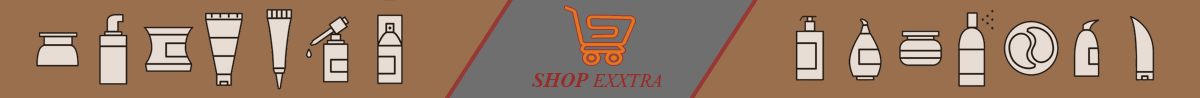
<style>
.page{position:relative;width:1200px;height:98px;background:#996f4e}
.page>*{position:absolute;margin:0}
.t1{font:19.5px "TimesNewRomanPS-Italic";color:#972b28;text-transform:uppercase}
.t2{font:20.8px "TimesNewRomanPS-BoldItalicMT";color:#972b28;text-transform:uppercase}
</style>
<div class="page">
<p class="t1" style="left:531px;top:73px;width:131px;height:14px"><span class="t2">SHOP</span> EXXTRA</p>
</div>
